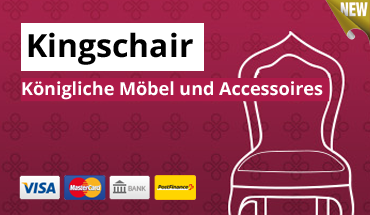
<style>
.page{position:relative;width:370px;height:215px}
.page>*{position:absolute;margin:0}
.t1{font:32px "OpenSans-Bold";color:#000000}
.t2{font:18px "OpenSans-Bold";color:#ffffff}
</style>
<div class="page">
<p class="t1" style="left:28px;top:32px;width:165px;height:33px">Kingschair</p>
<p class="t2" style="left:22px;top:81px;width:301px;height:19px">Königliche Möbel und Accessoires</p>
</div>
